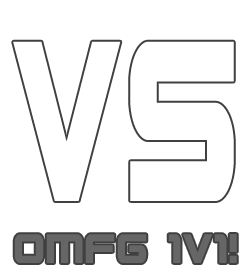
<style>
.page{position:relative;width:250px;height:276px;background:#ffffff}
.page>*{position:absolute;margin:0}
.t1{font:50px "GunshipCondensed";color:#666666;scale:0.84 1}
</style>
<div class="page">
<p class="t1" style="left:14px;top:234px;width:223px;height:29px">omfg 1v1!</p>
</div>
